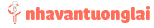
<style>
.page{position:relative;width:154px;height:28px;background:#ffffff}
.page>*{position:absolute;margin:0}
.t1{font:18px "iCielCadena";color:#ff6e5a}
</style>
<div class="page">
<p class="t1" style="left:26px;top:6px;width:124px;height:17px">nhavantuonglai</p>
</div>
